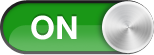
<style>
.page{position:relative;width:154px;height:55px}
.page>*{position:absolute;margin:0}
.t1{font:32px "HelveticaNeue-Bold";color:#ffffff}
</style>
<div class="page">
<p class="t1" style="left:31px;top:15px;width:46px;height:25px">ON</p>
</div>
